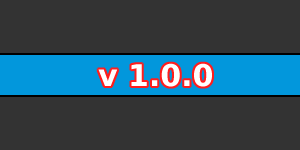
<style>
.page{position:relative;width:300px;height:150px;background:#333333}
.page>*{position:absolute;margin:0}
.t1{font:30px "BitstreamVeraSans-Bold";color:#ffffff}
</style>
<div class="page">
<p class="t1" style="left:98px;top:63px;width:114px;height:24px">v 1.0.0</p>
</div>
